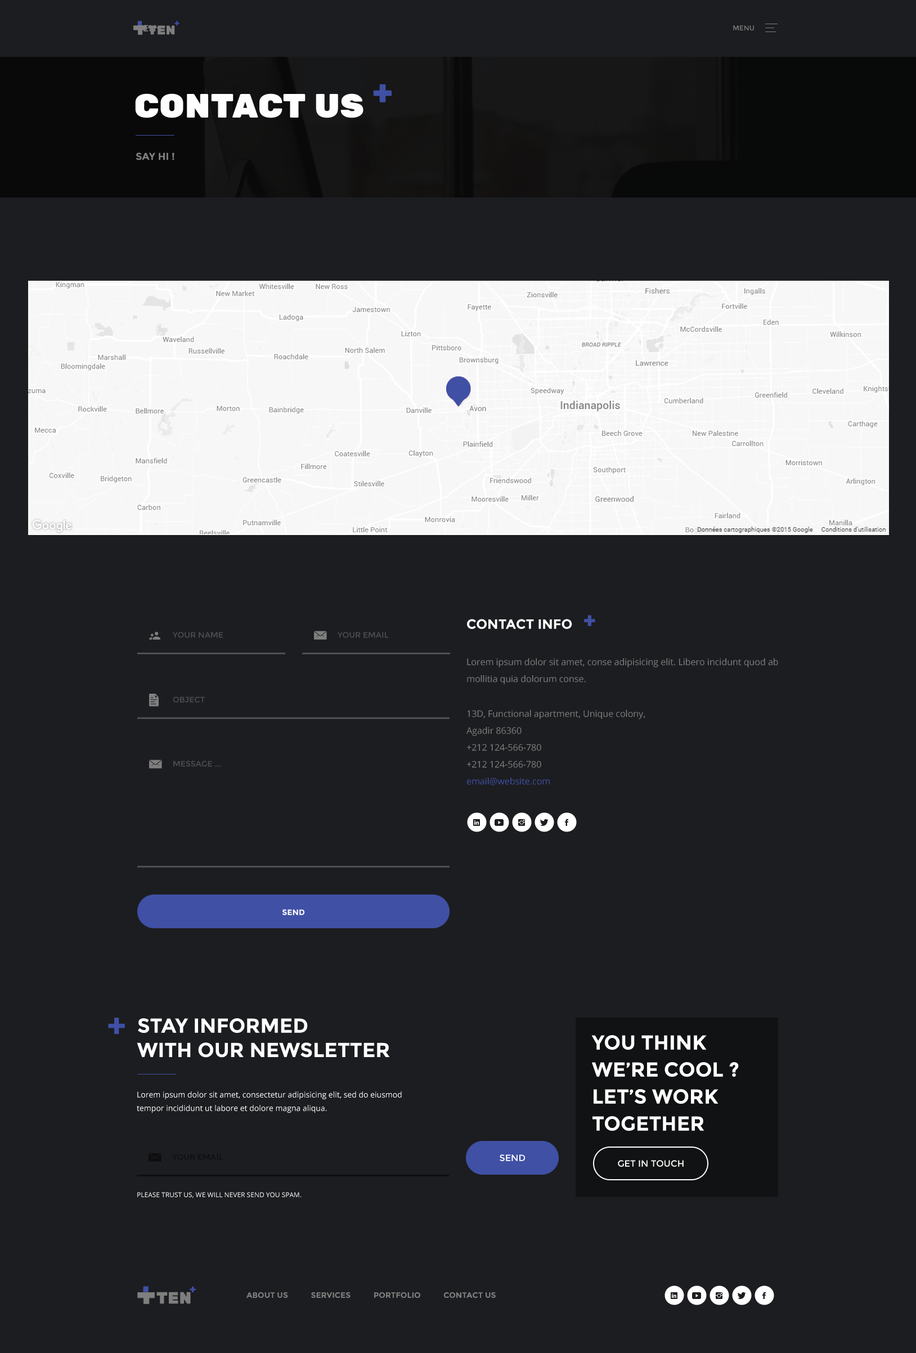
<style>
.page{position:relative;width:916px;height:1353px;background:#1c1d20}
.page>*{position:absolute;margin:0}
.t1{font:9px "Montserrat-Regular";color:#7f7f7f;text-transform:uppercase}
.t2{font:12.8px "RubikOne-Regular";color:#7e7e7e;text-transform:uppercase}
.t3{font:8.3px "RubikOne-Regular";color:#3f50a5;text-transform:uppercase}
.t4{font:6.8px "Montserrat-Regular";color:#7f7f7f;text-transform:uppercase}
.t5{font:33.7px "RubikOne-Regular";color:#3f50a5;text-transform:uppercase}
.t6{font:33.7px "RubikOne-Regular";color:#fefefe;text-transform:uppercase}
.t7{font:10.1px "Montserrat-Bold";color:#808080;text-transform:uppercase}
.t8{font:20.2px "RubikOne-Regular";color:#3f50a5;text-transform:uppercase}
.t9{font:13.5px "Montserrat-Bold";color:#ffffff;text-transform:uppercase}
.t10{font:7.9px "Montserrat-Regular";color:#4e4e50;text-transform:uppercase}
.t11{font:9px/16.9px "OpenSans";color:#7f7f7f}
.t12{font:9px/16.9px "OpenSans";color:#3f50a5}
.t13{font:7.9px "Montserrat-Bold";color:#ffffff;text-transform:uppercase}
.t14{font:33.8px "Montserrat-Bold";color:#3f50a5;text-transform:uppercase}
.t15{font:20.2px "Montserrat-Bold";color:#ffffff;text-transform:uppercase}
.t16{font:20.2px/27px "Montserrat-Bold";color:#ffffff;text-transform:uppercase}
.t17{font:7.9px/13.5px "OpenSans";color:#ffffff}
.t18{font:7.9px "Montserrat-Regular";color:#000000;text-transform:uppercase}
.t19{font:9px "Montserrat-Regular";color:#ffffff;text-transform:uppercase}
.t20{font:6.8px "OpenSans";color:#ffffff;text-transform:uppercase}
.t21{font:10.7px "RubikOne-Regular";color:#3f50a5;text-transform:uppercase}
.t22{font:16.3px "RubikOne-Regular";color:#7e7e7e;text-transform:uppercase}
.t23{font:7.9px "Montserrat-Bold";color:#7f7f7f;text-transform:uppercase}
</style>
<div class="page">
<p class="t1" style="left:137px;top:25px;width:24px;height:7px">ten+</p>
<p class="t2" style="left:148px;top:25px;width:27px;height:10px">ten</p>
<p class="t3" style="left:174px;top:21px;width:5px;height:5px">+</p>
<p class="t4" style="left:733px;top:25px;width:21px;height:5px">menu</p>
<p class="t5" style="left:373px;top:84px;width:19px;height:18px">+</p>
<p class="t6" style="left:135px;top:93px;width:228px;height:25px">contact us</p>
<p class="t7" style="left:136px;top:152px;width:38px;height:8px">say hi !</p>
<p class="t8" style="left:584px;top:615px;width:11px;height:11px">+</p>
<p class="t9" style="left:467px;top:619px;width:105px;height:10px">contact info</p>
<p class="t10" style="left:173px;top:632px;width:50px;height:6px">your name</p>
<p class="t10" style="left:338px;top:632px;width:51px;height:6px">Your email</p>
<p class="t11" style="left:467px;top:658px;width:311px;height:26px">Lorem ipsum dolor sit amet, conse adipisicing elit. Libero incidunt quod ab mollitia quia dolorum conse.</p>
<p class="t10" style="left:173px;top:696px;width:32px;height:7px">object</p>
<p class="t11" style="left:466px;top:710px;width:179px;height:75px">13D, Functional apartment, Unique colony, Agadir 86360<br>+212 124-566-780<br>+212 124-566-780<br><span class="t12">email@website.com</span></p>
<p class="t10" style="left:173px;top:760px;width:48px;height:7px">message ...</p>
<p class="t13" style="left:282px;top:909px;width:22px;height:6px">send</p>
<p class="t14" style="left:108px;top:1018px;width:17px;height:16px">+</p>
<p class="t15" style="left:137px;top:1018px;width:253px;height:40px">stay informed<br>with our newsletter</p>
<p class="t16" style="left:591px;top:1035px;width:148px;height:96px">you think we’re cool ? <br>let’s work together</p>
<p class="t17" style="left:137px;top:1091px;width:265px;height:22px">Lorem ipsum dolor sit amet, consectetur adipisicing elit, sed do eiusmod<br>tempor incididunt ut labore et dolore magna aliqua.</p>
<p class="t18" style="left:172px;top:1154px;width:51px;height:6px;opacity:0.5">Your email</p>
<p class="t19" style="left:500px;top:1154px;width:25px;height:7px">send</p>
<p class="t19" style="left:618px;top:1160px;width:65px;height:7px">get in touch</p>
<p class="t20" style="left:137px;top:1192px;width:165px;height:6px">Please trust us, we will never send you spam.</p>
<p class="t21" style="left:190px;top:1286px;width:6px;height:6px">+</p>
<p class="t22" style="left:156px;top:1292px;width:35px;height:12px">ten</p>
<p class="t23" style="left:246px;top:1292px;width:250px;height:6px">about us           services           portfolio           contact us</p>
</div>
